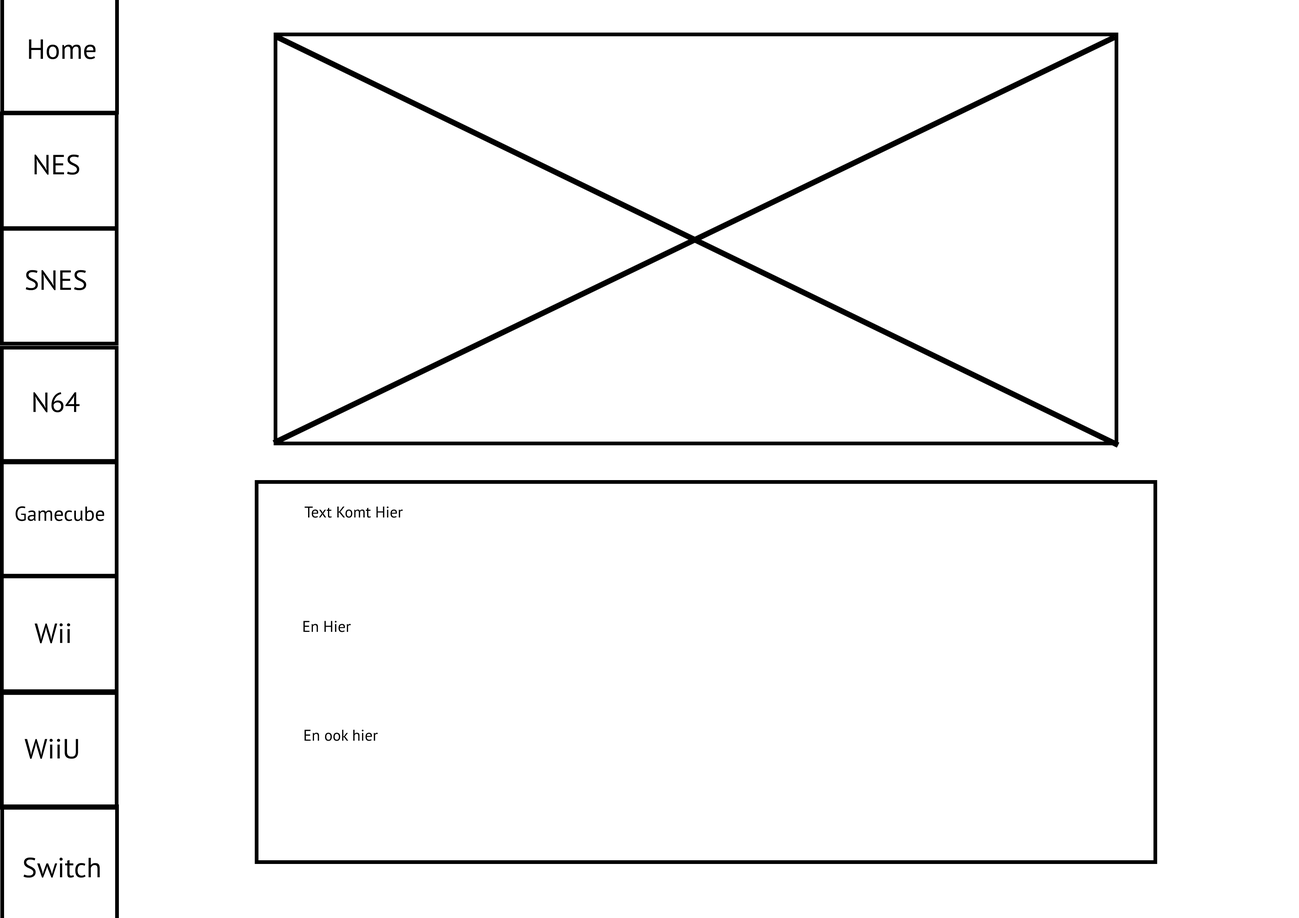
<style>
.page{position:relative;width:1299px;height:918px;background:#ffffff}
.page>*{position:absolute;margin:0}
.t1{font:27.8px "MyriadPro-Regular";color:#000000}
.t2{font:20.4px "MyriadPro-Regular";color:#000000}
.t3{font:15.5px "MyriadPro-Regular";color:#000000}
</style>
<div class="page">
<p class="t1" style="left:29px;top:39px;width:67px;height:20px">Home</p>
<p class="t1" style="left:34px;top:154px;width:45px;height:21px">NES</p>
<p class="t1" style="left:26px;top:270px;width:60px;height:20px">SNES</p>
<p class="t1" style="left:33px;top:392px;width:47px;height:20px">N64</p>
<p class="t2" style="left:16px;top:506px;width:88px;height:15px">Gamecube</p>
<p class="t3" style="left:304px;top:506px;width:99px;height:12px">Text Komt Hier</p>
<p class="t1" style="left:34px;top:623px;width:36px;height:20px">Wii</p>
<p class="t3" style="left:303px;top:621px;width:48px;height:11px">En Hier</p>
<p class="t3" style="left:304px;top:730px;width:74px;height:11px">En ook hier</p>
<p class="t1" style="left:24px;top:739px;width:54px;height:20px">WiiU</p>
<p class="t1" style="left:23px;top:857px;width:77px;height:21px">Switch</p>
</div>
